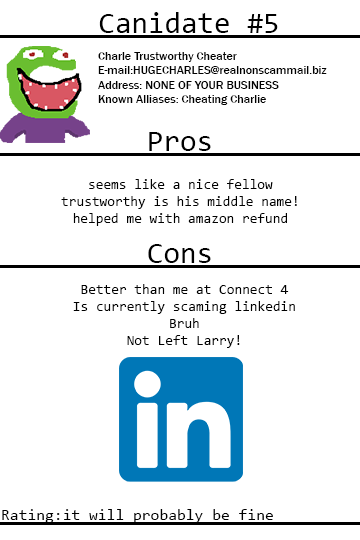
<style>
.page{position:relative;width:360px;height:540px;background:#ffffff}
.page>*{position:absolute;margin:0}
.t1{font:30px "Consolas";color:#000000}
.t2{font:12px "FranklinGothic-Medium";color:#000000}
.t3{font:14px "Consolas";color:#000000}
.t4{font:16px "Consolas";color:#000000}
</style>
<div class="page">
<p class="t1" style="left:99px;top:12px;width:179px;height:21px">Canidate #5</p>
<p class="t2" style="left:98px;top:52px;width:229px;height:53px">Charle Trustworthy Cheater<br>E-mail:HUGECHARLES@realnonscammail.biz<br>Address: NONE OF YOUR BUSINESS<br>Known Alliases: Cheating Charlie</p>
<p class="t1" style="left:149px;top:132px;width:62px;height:19px">Pros</p>
<p class="t3" style="left:61px;top:179px;width:236px;height:47px;text-align:center">seems like a nice fellow<br>trustworthy is his middle name!<br>helped me with amazon refund</p>
<p class="t1" style="left:148px;top:244px;width:63px;height:19px">Cons</p>
<p class="t3" style="left:73px;top:284px;width:222px;height:64px;text-align:center">Better than me at Connect 4<br>Is currently scaming linkedin<br>Bruh<br>Not Left Larry!</p>
<p class="t4" style="left:2px;top:509px;width:271px;height:14px">Rating:it will probably be fine</p>
</div>
